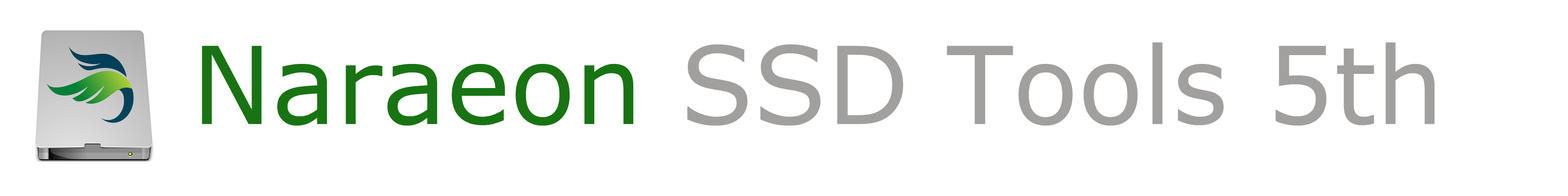
<style>
.page{position:relative;width:1568px;height:196px;background:#ffffff}
.page>*{position:absolute;margin:0}
.t1{font:107.1px "Verdana";color:#a29f9f}
.t2{font:107.1px "Verdana";color:#187413}
</style>
<div class="page">
<p class="t1" style="left:202px;top:42px;width:1233px;height:83px"><span class="t2">Naraeon</span> SSD Tools 5th</p>
</div>
